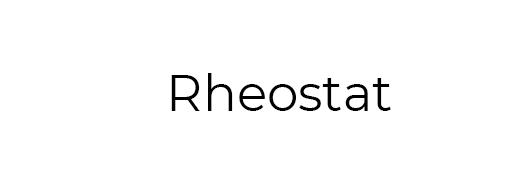
<style>
.page{position:relative;width:513px;height:180px;background:#ffffff}
.page>*{position:absolute;margin:0}
.t1{font:50px "Montserrat-Regular";color:#000000}
</style>
<div class="page">
<p class="t1" style="left:171px;top:73px;width:220px;height:38px">Rheostat</p>
</div>
